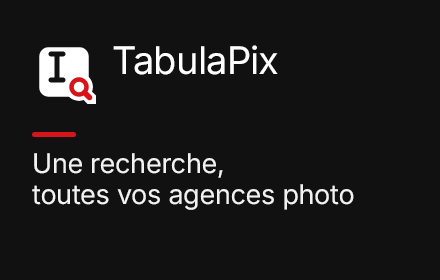
<style>
.page{position:relative;width:440px;height:280px;background:#111111}
.page>*{position:absolute;margin:0}
.t1{font:38px "Inter-ExtraBold";letter-spacing:-0.021em;color:#ffffff}
.t2{font:27px/31.1px "Inter-Bold";letter-spacing:-0.011em;color:#f2f2f2}
</style>
<div class="page">
<p class="t1" style="left:113px;top:45px;width:165px;height:30px">TabulaPix</p>
<p class="t2" style="left:32px;top:153px;width:322px;height:57px">Une recherche,<br>toutes vos agences photo</p>
</div>
